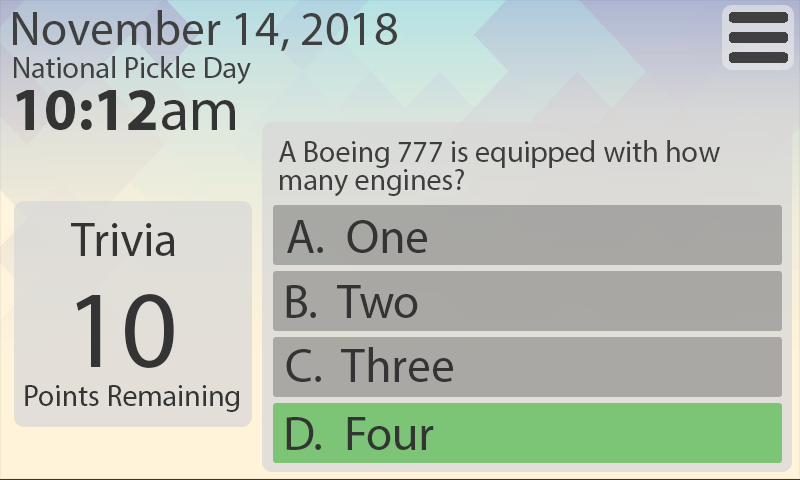
<style>
.page{position:relative;width:800px;height:480px}
.page>*{position:absolute;margin:0}
.t1{font:48px "MyriadPro-Regular";color:#404040}
.t2{font:30px "MyriadPro-Regular";color:#404040}
.t3{font:60px "MyriadPro-Bold";color:#343434}
.t4{font:60px "MyriadPro-Regular";color:#343434}
.t5{font:30px/28px "MyriadPro-Regular";color:#3e3e3e}
.t6{font:48px "MyriadPro-Regular";color:#343434}
.t7{font:110px "MyriadPro-Regular";color:#343434}
.t8{font:30px "MyriadPro-Regular";color:#343434}
</style>
<div class="page">
<p class="t1" style="left:13px;top:10px;width:384px;height:41px">November 14, 2018</p>
<p class="t2" style="left:14px;top:56px;width:237px;height:29px">National Pickle Day</p>
<p class="t3" style="left:16px;top:90px;width:219px;height:40px">10:12<span class="t4">am</span></p>
<p class="t5" style="left:279px;top:140px;width:441px;height:57px">A Boeing 777 is equipped with how <br> many engines?</p>
<p class="t6" style="left:287px;top:220px;width:140px;height:33px">A.  One</p>
<p class="t6" style="left:71px;top:223px;width:104px;height:33px">Trivia</p>
<p class="t7" style="left:76px;top:294px;width:98px;height:74px">10</p>
<p class="t6" style="left:286px;top:285px;width:132px;height:33px">B.  Two</p>
<p class="t6" style="left:286px;top:347px;width:167px;height:35px">C.  Three</p>
<p class="t8" style="left:25px;top:385px;width:214px;height:27px">Points Remaining</p>
<p class="t6" style="left:286px;top:417px;width:148px;height:33px">D.  Four</p>
</div>
